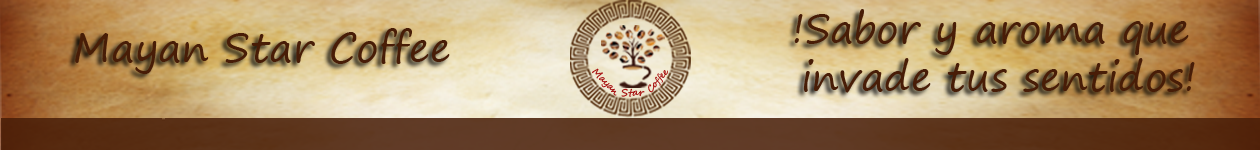
<style>
.page{position:relative;width:1260px;height:150px}
.page>*{position:absolute;margin:0}
.t1{font:40px "SegoePrint";color:#481d07}
.t2{font:9.7px "SegoeScript";color:#a50c0c;scale:0.96 1}
.t3{font:9px "SegoeScript";color:#a50c0c}
.t4{font:9.7px "SegoeScript";color:#a50c0c;scale:1.05 1}
</style>
<div class="page">
<p class="t1" style="left:794px;top:9px;width:401px;height:84px;text-align:center">!Sabor y aroma que <br>invade tus sentidos!</p>
<p class="t1" style="left:75px;top:28px;width:375px;height:46px">Mayan Star Coffee</p>
<p class="t2" style="left:592px;top:68px;width:25px;height:28px;rotate:46deg">Mayan</p>
<p class="t3" style="left:648px;top:70px;width:20px;height:23px;rotate:-49deg">Coffee</p>
<p class="t4" style="left:621px;top:88px;width:24px;height:9px">Star</p>
</div>
